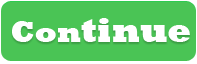
<style>
.page{position:relative;width:197px;height:64px;background:#4ac455}
.page>*{position:absolute;margin:0}
.t1{font:35px "Rockwell-ExtraBold";color:#ffffff}
.t2{font:30px "Rockwell-ExtraBold";color:#ffffff}
</style>
<div class="page">
<p class="t1" style="left:12px;top:18px;width:178px;height:24px"><span class="t2">Con</span>tinue</p>
</div>
